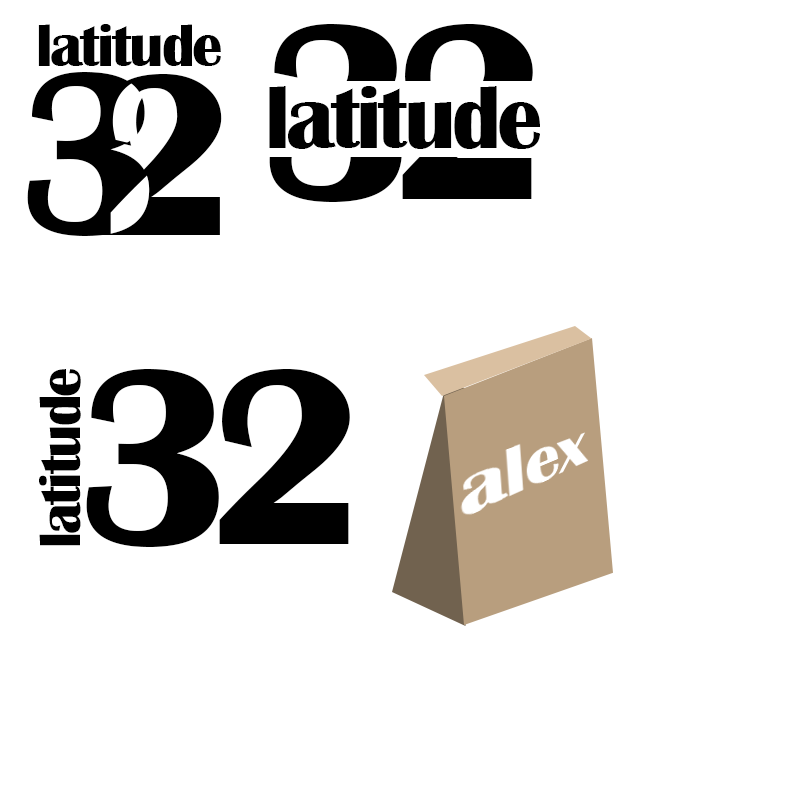
<style>
.page{position:relative;width:800px;height:800px;background:#ffffff}
.page>*{position:absolute;margin:0}
.t1{font:60.9px "BritannicBold";letter-spacing:-0.04em;color:#000000}
.t2{font:258.4px "BritannicBold";letter-spacing:-0.1em;color:#000000}
.t3{font:238px "BritannicBold";letter-spacing:-0.04em;color:#000000}
.t4{font:91px "BritannicBold";letter-spacing:-0.04em;color:#000000}
.t5{font:60px "BritannicBold";letter-spacing:-0.04em;color:#000000}
</style>
<div class="page">
<p class="t1" style="left:38px;top:24px;width:183px;height:42px">latitude</p>
<p class="t2" style="left:269px;top:24px;width:264px;height:178px">32</p>
<p class="t3" style="left:27px;top:72px;width:123px;height:164px">3</p>
<p class="t3" style="left:101px;top:74px;width:121px;height:161px">2</p>
<p class="t4" style="left:269px;top:86px;width:271px;height:63px">latitude</p>
<p class="t5" style="left:39px;top:369px;width:42px;height:177px;rotate:-90deg">latitude</p>
<p class="t2" style="left:86px;top:369px;width:264px;height:178px">32</p>
</div>
